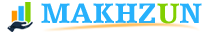
<style>
.page{position:relative;width:210px;height:33px;background:#ffffff}
.page>*{position:absolute;margin:0}
.t1{font:30px "HumanistSlabserif712BT-Black";color:#27b1fc}
.t2{font:30px "HumanistSlabserif712BT-Black";color:#81cf01}
</style>
<div class="page">
<p class="t1" style="left:41px;top:3px;width:161px;height:21px">MAKHZ<span class="t2">U</span>N</p>
</div>
